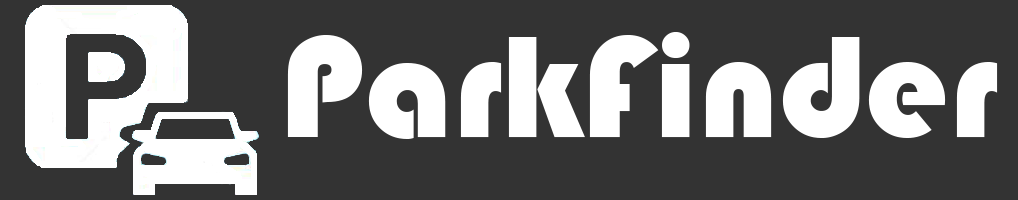
<style>
.page{position:relative;width:1018px;height:200px;background:#333333}
.page>*{position:absolute;margin:0}
.t1{font:150px "Bauhaus93";color:#ffffff}
</style>
<div class="page">
<p class="t1" style="left:287px;top:32px;width:711px;height:107px">ParkFinder</p>
</div>
